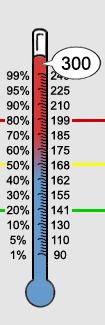
<style>
.page{position:relative;width:105px;height:325px;background:#e5e5e5}
.page>*{position:absolute;margin:0}
.t1{font:18px "ArialMT";color:#000000}
.t2{font:11.7px/14.9px "ArialMT";color:#000000}
</style>
<div class="page">
<p class="t1" style="left:61px;top:56px;width:30px;height:14px">300</p>
<p class="t2" style="left:6px;top:71px;width:24px;height:189px;text-align:center">99%<br>95%<br>90%<br>80%<br>70%<br>60%<br>50%<br>40%<br>30%<br>20%<br>10%<br>5%<br>1%</p>
<p class="t2" style="left:50px;top:71px;width:20px;height:189px;text-align:center">245<br>225<br>210<br>199<br>185<br>175<br>168<br>162<br>155<br>141<br>130<br>110<br>90</p>
</div>
